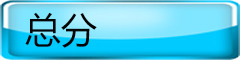
<style>
.page{position:relative;width:240px;height:60px}
.page>*{position:absolute;margin:0}
.t1{font:36px "MicrosoftYaHei";color:#040404}
</style>
<div class="page">
<p class="t1" style="left:25px;top:12px;width:72px;height:36px">总分</p>
</div>
